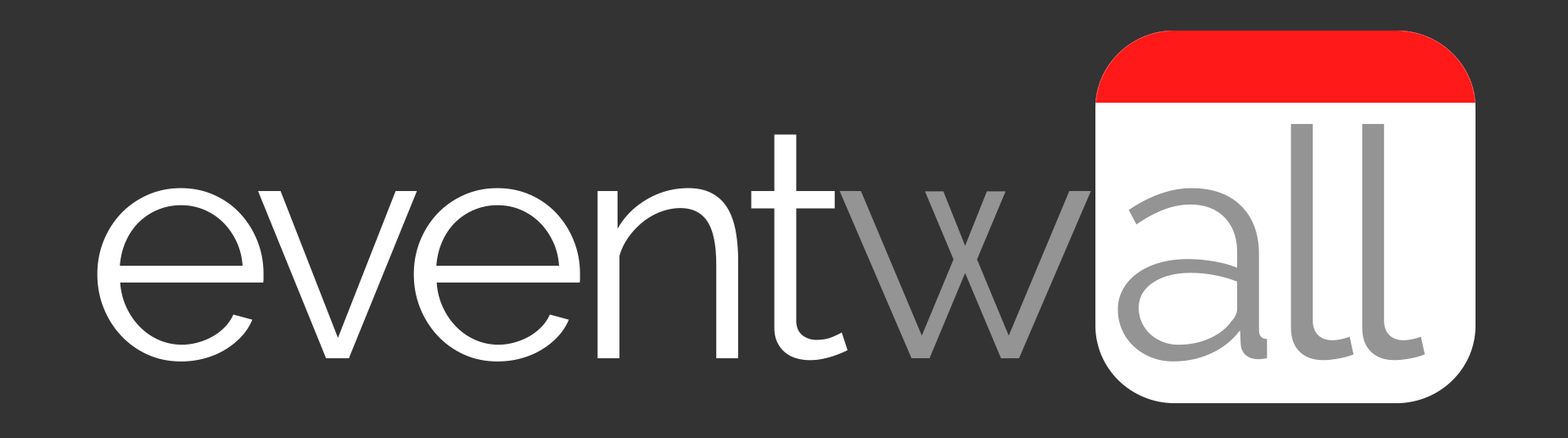
<style>
.page{position:relative;width:1568px;height:438px;background:#333333}
.page>*{position:absolute;margin:0}
.t1{font:320.9px "Raleway-Regular";letter-spacing:-0.05em;color:#ffffff}
.t2{font:320.9px "Raleway-Regular";letter-spacing:0.05em;color:#949494}
.t3{font:320.9px "Raleway-Regular";letter-spacing:-0.05em;color:#949494}
</style>
<div class="page">
<p class="t1" style="left:97px;top:124px;width:1328px;height:237px">event<span class="t2">w</span><span class="t3">all</span></p>
</div>
